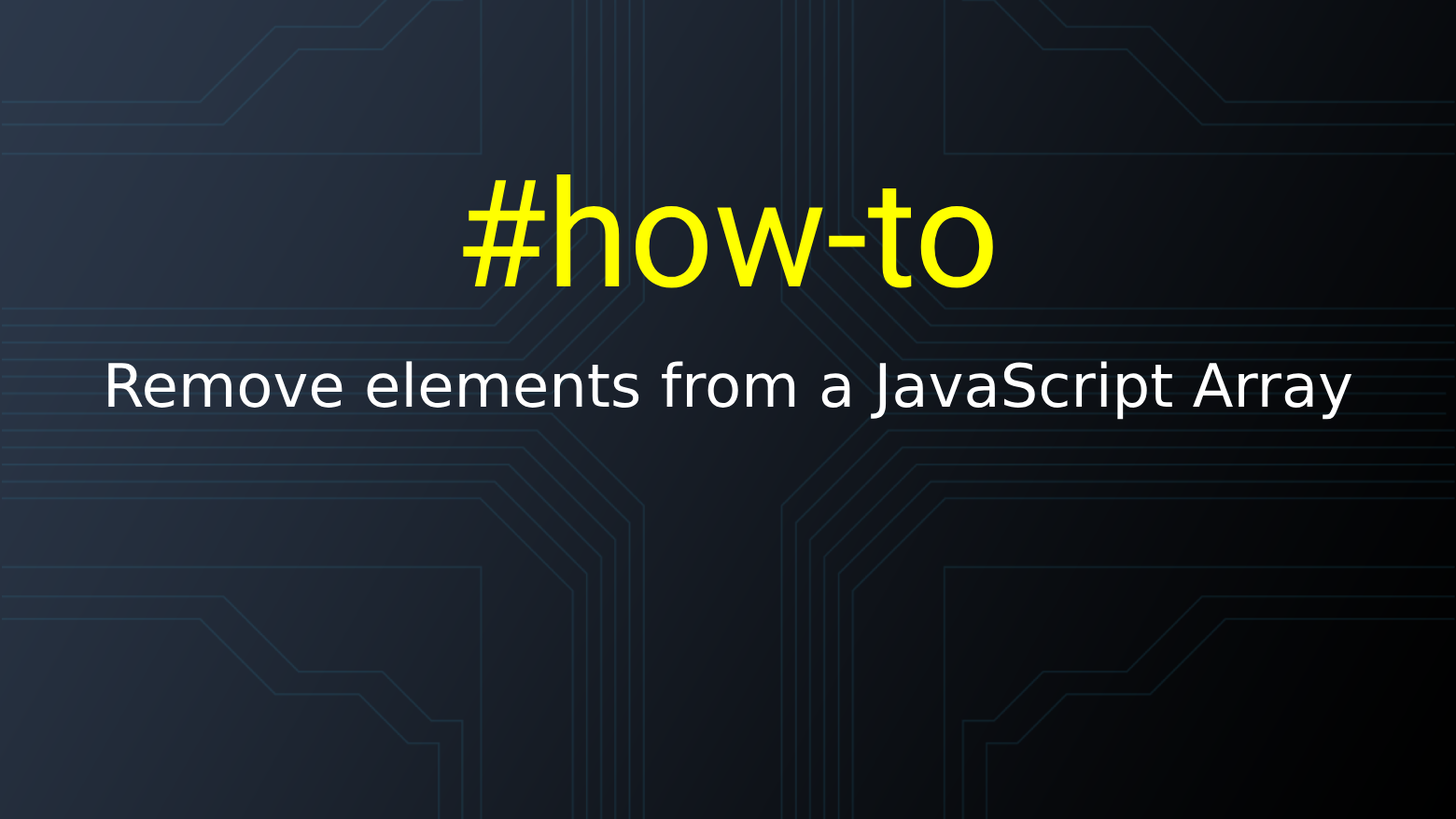
<style>
.page{position:relative;width:1456px;height:819px}
.page>*{position:absolute;margin:0}
.t1{font:149.3px "Heebo-Regular";color:#ffff00}
.t2{font:59.7px "DejaVuSans";color:#ffffff}
</style>
<div class="page">
<p class="t1" style="left:463px;top:174px;width:530px;height:114px">#how-to</p>
<p class="t2" style="left:108px;top:361px;width:1244px;height:59px">Remove elements from a JavaScript Array</p>
</div>
